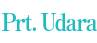
<style>
.page{position:relative;width:97px;height:43px;background:#ffffff}
.page>*{position:absolute;margin:0}
.t1{font:24px "RyuminPro-ExBold";letter-spacing:-0.08em;color:#1dbcc0;scale:0.9 1}
</style>
<div class="page">
<p class="t1" style="left:2px;top:13px;width:96px;height:18px">Prt. Udara</p>
</div>
